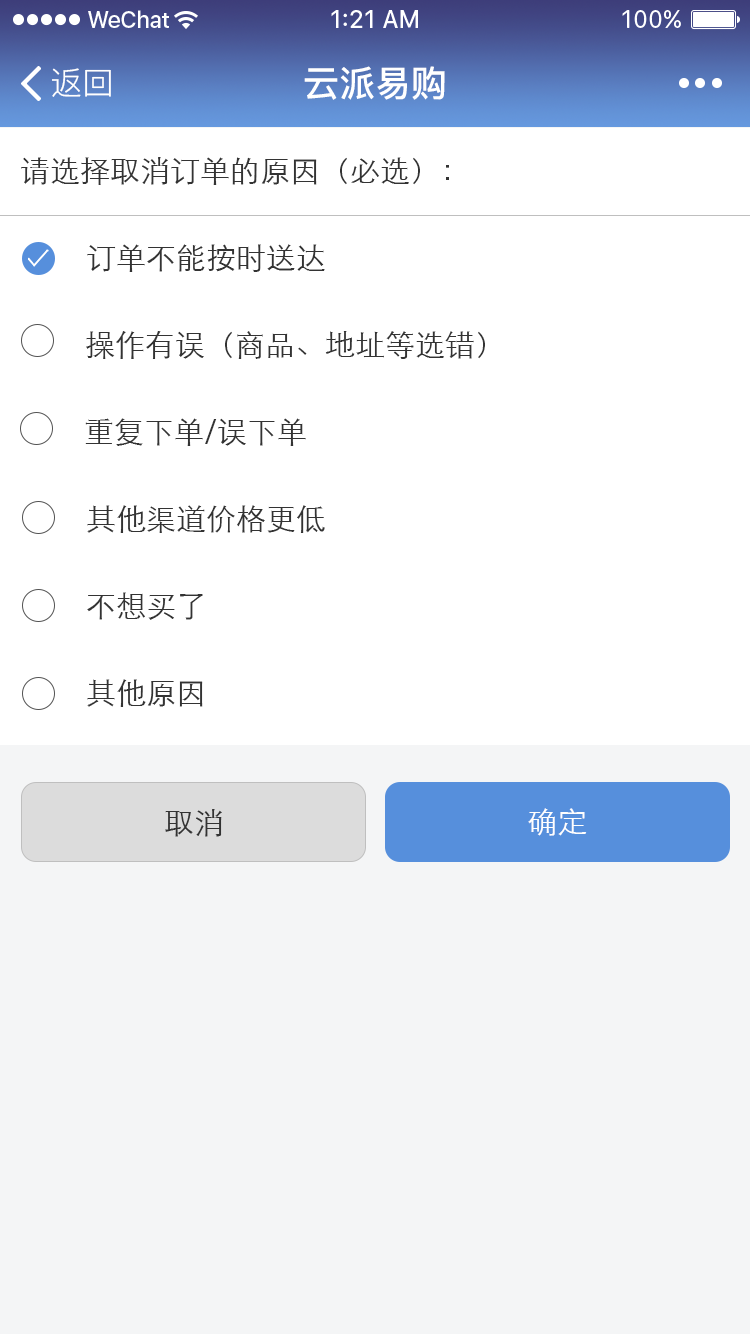
<style>
.page{position:relative;width:750px;height:1334px;background:#ffffff}
.page>*{position:absolute;margin:0}
.t1{font:32px "PingFang-SC-Regular";color:#ffffff}
.t2{font:36px "PingFang-SC-Bold";color:#ffffff}
.t3{font:30px "STXihei";color:#333333}
.t4{font:30px "STXihei";color:#fefefe}
</style>
<div class="page">
<p class="t1" style="left:52px;top:68px;width:59px;height:29px">返回</p>
<p class="t2" style="left:304px;top:66px;width:141px;height:34px">云派易购</p>
<p class="t3" style="left:21px;top:157px;width:428px;height:28px">请选择取消订单的原因（必选）：</p>
<p class="t3" style="left:87px;top:244px;width:238px;height:28px">订单不能按时送达</p>
<p class="t3" style="left:86px;top:331px;width:399px;height:28px">操作有误（商品、地址等选错）</p>
<p class="t3" style="left:85px;top:418px;width:221px;height:28px">重复下单/误下单</p>
<p class="t3" style="left:87px;top:505px;width:238px;height:28px">其他渠道价格更低</p>
<p class="t3" style="left:87px;top:592px;width:116px;height:28px">不想买了</p>
<p class="t3" style="left:87px;top:679px;width:116px;height:28px">其他原因</p>
<p class="t3" style="left:165px;top:809px;width:57px;height:28px">取消</p>
<p class="t4" style="left:528px;top:808px;width:59px;height:28px">确定</p>
</div>
